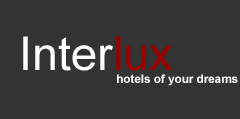
<style>
.page{position:relative;width:240px;height:119px;background:#333333}
.page>*{position:absolute;margin:0}
.t1{font:46.7px "ArialMT";color:#ffffff}
.t2{font:46.7px "ArialMT";color:#990000}
.t3{font:11.7px "Arial-BoldMT";color:#ffffff}
</style>
<div class="page">
<p class="t1" style="left:23px;top:36px;width:149px;height:35px">Inter<span class="t2">lux</span></p>
<p class="t3" style="left:117px;top:74px;width:121px;height:12px">hotels of your dreams</p>
</div>
